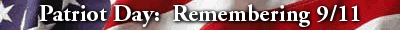
<style>
.page{position:relative;width:400px;height:30px}
.page>*{position:absolute;margin:0}
.t1{font:24px "AGaramond-Bold";color:#ffffff}
</style>
<div class="page">
<p class="t1" style="left:39px;top:4px;width:321px;height:23px">Patriot Day:  Remembering 9/11</p>
</div>
